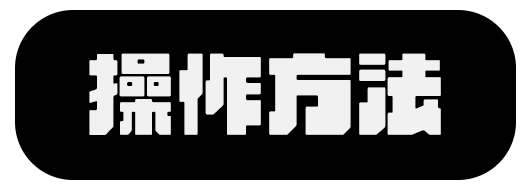
<style>
.page{position:relative;width:530px;height:190px;background:#000000}
.page>*{position:absolute;margin:0}
.t1{font:90px "AB-countryroad";color:#f1f1f1}
</style>
<div class="page">
<p class="t1" style="left:89px;top:53px;width:352px;height:82px">操作方法</p>
</div>
